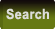
<style>
.page{position:relative;width:55px;height:29px;background:#667913}
.page>*{position:absolute;margin:0}
.t1{font:14px "Arial-BoldMT";letter-spacing:0.025em;color:#dcddda;scale:0.9 1}
</style>
<div class="page">
<p class="t1" style="left:6px;top:8px;width:43px;height:12px">Search</p>
</div>
